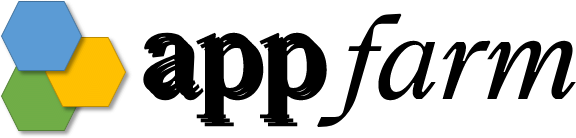
<style>
.page{position:relative;width:576px;height:138px;background:#ffffff}
.page>*{position:absolute;margin:0}
.t1{font:127px "HappyTimesattheIKOB-Italic";color:#000000}
.t2{font:127px "HappyTimesattheIKOB-Regular";color:#000000}
</style>
<div class="page">
<p class="t1" style="left:317px;top:13px;width:259px;height:114px">farm</p>
<p class="t2" style="left:143px;top:32px;width:176px;height:87px">app</p>
<p class="t2" style="left:147px;top:36px;width:176px;height:87px">app</p>
<p class="t2" style="left:151px;top:40px;width:176px;height:87px">app</p>
</div>
